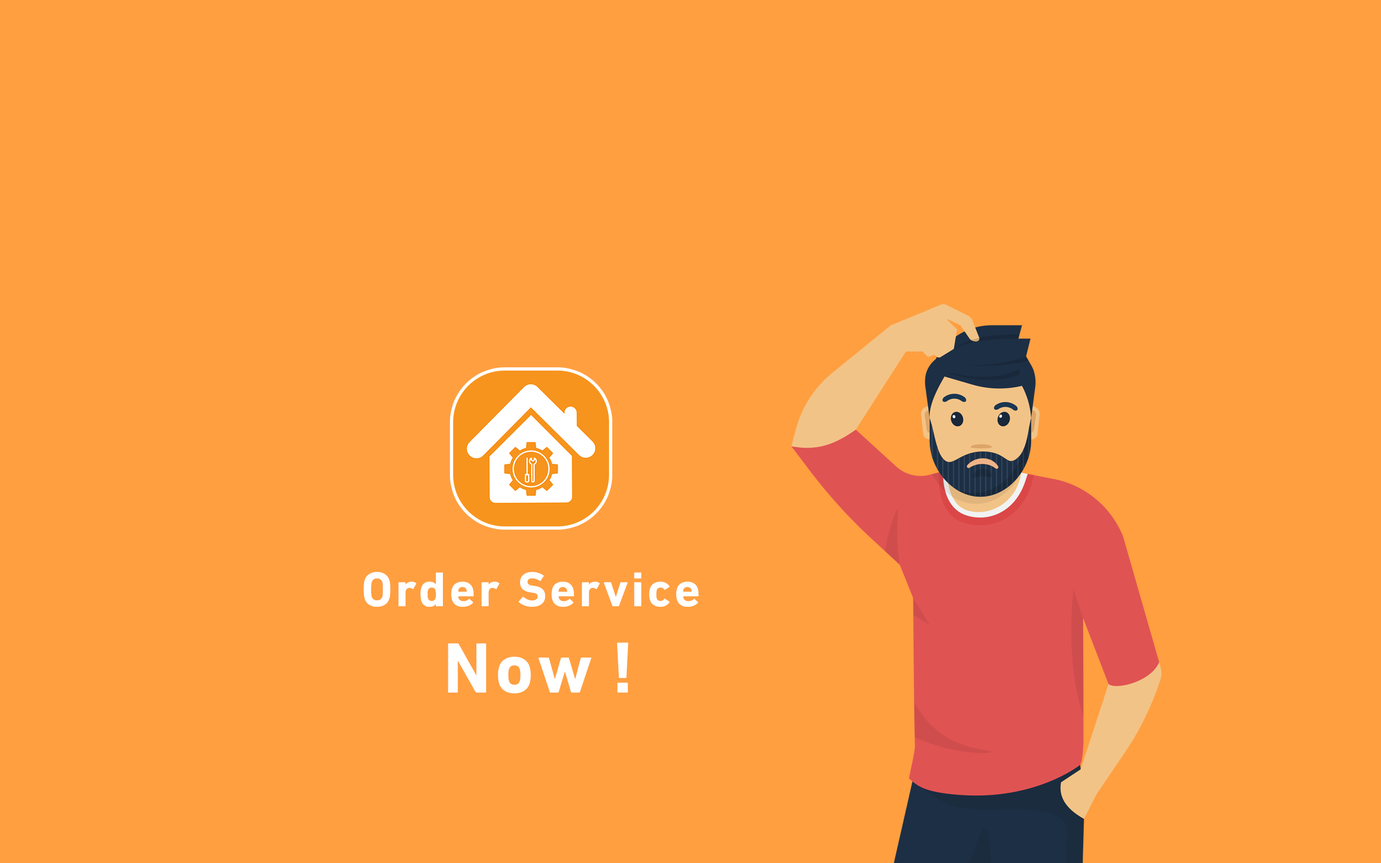
<style>
.page{position:relative;width:1381px;height:863px;background:#ff9f40}
.page>*{position:absolute;margin:0}
.t1{font:49.6px/43.2px "DINNextLTW23-Bold";letter-spacing:0.06em;color:#ffffff}
.t2{font:72.3px/43.2px "DINNextLTW23-Bold";letter-spacing:0.06em;color:#ffffff}
.t3{font:73.4px/43.2px "DINNextLTW23-Bold";letter-spacing:0.06em;color:#ffffff}
</style>
<div class="page">
<p class="t1" style="left:364px;top:572px;width:335px;height:122px;text-align:center">Order Service<br><br> <span class="t2">Now </span><span class="t3">!</span></p>
</div>
